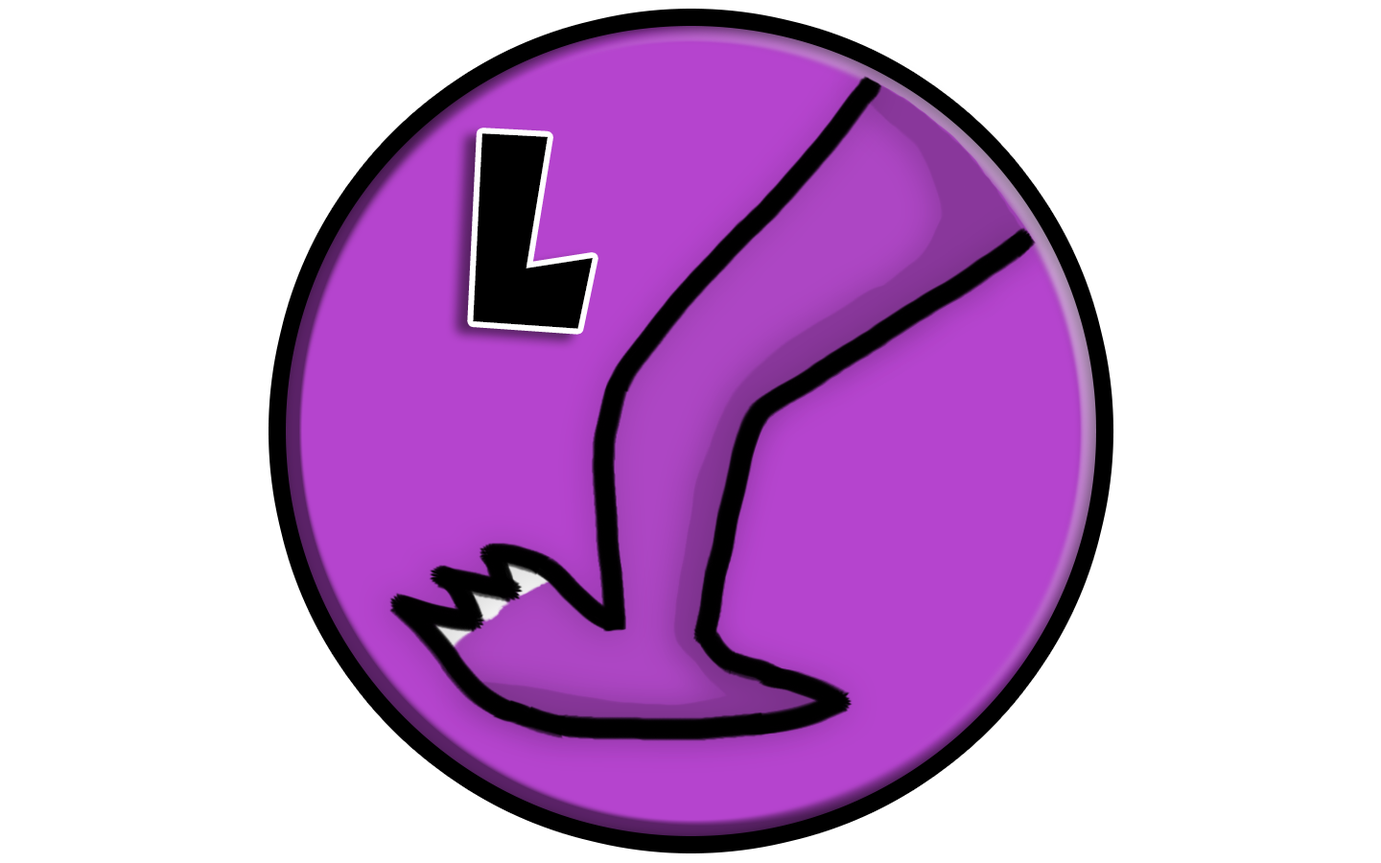
<style>
.page{position:relative;width:1381px;height:863px;background:#ffffff}
.page>*{position:absolute;margin:0}
.t1{font:270.8px "Funhouse";color:#000000}
</style>
<div class="page">
<p class="t1" style="left:473px;top:133px;width:120px;height:196px">L</p>
</div>
